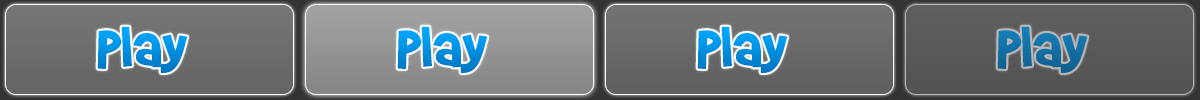
<style>
.page{position:relative;width:1200px;height:100px}
.page>*{position:absolute;margin:0}
.t1{font:66px "BradyBunchRemastered";color:#0090e1}
.t2{font:66px "BradyBunchRemastered";color:#1270a4}
</style>
<div class="page">
<p class="t1" style="left:97px;top:26px;width:91px;height:47px">Play</p>
<p class="t1" style="left:397px;top:26px;width:91px;height:47px">Play</p>
<p class="t1" style="left:697px;top:26px;width:91px;height:47px">Play</p>
<p class="t2" style="left:997px;top:26px;width:91px;height:47px">Play</p>
</div>
